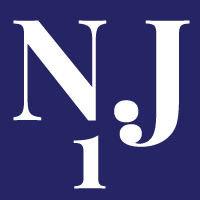
<style>
.page{position:relative;width:200px;height:200px;background:#252565}
.page>*{position:absolute;margin:0}
.t1{font:140.7px "PlayfairDisplay-Bold";letter-spacing:-0.02em;color:#ffffff}
.t2{font:100px "PlayfairDisplay-Bold";letter-spacing:-0.02em;color:#ffffff}
</style>
<div class="page">
<p class="t1" style="left:13px;top:20px;width:177px;height:127px">N.J</p>
<p class="t2" style="left:73px;top:135px;width:33px;height:54px">1</p>
</div>
